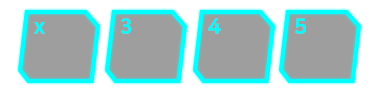
<style>
.page{position:relative;width:375px;height:94px;background:#9e9e9e}
.page>*{position:absolute;margin:0}
.t1{font:20.8px "NanumSquare_acEB";color:#01fcff}
</style>
<div class="page">
<p class="t1" style="left:34px;top:22px;width:11px;height:12px">x</p>
<p class="t1" style="left:121px;top:18px;width:11px;height:16px">3</p>
<p class="t1" style="left:208px;top:18px;width:13px;height:16px">4</p>
<p class="t1" style="left:295px;top:18px;width:11px;height:16px">5</p>
</div>
